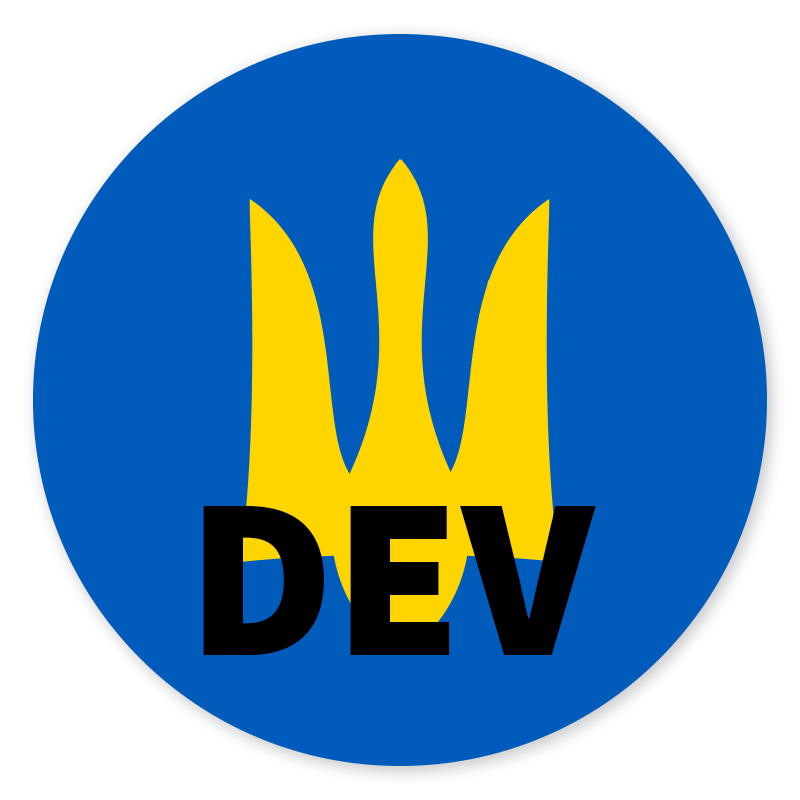
<style>
.page{position:relative;width:800px;height:800px;background:#005bbb}
.page>*{position:absolute;margin:0}
.t1{font:229.2px "SourceSansPro-Black";color:#000000}
</style>
<div class="page">
<p class="t1" style="left:203px;top:505px;width:393px;height:151px">DEV</p>
</div>
